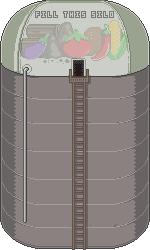
<style>
.page{position:relative;width:150px;height:250px;background:#8b8181}
.page>*{position:absolute;margin:0}
.t1{font:8px "KenPixel-Blocks";color:#767676}
</style>
<div class="page">
<p class="t1" style="left:35px;top:11px;width:79px;height:7px">FILL  THIS  SILO</p>
</div>
